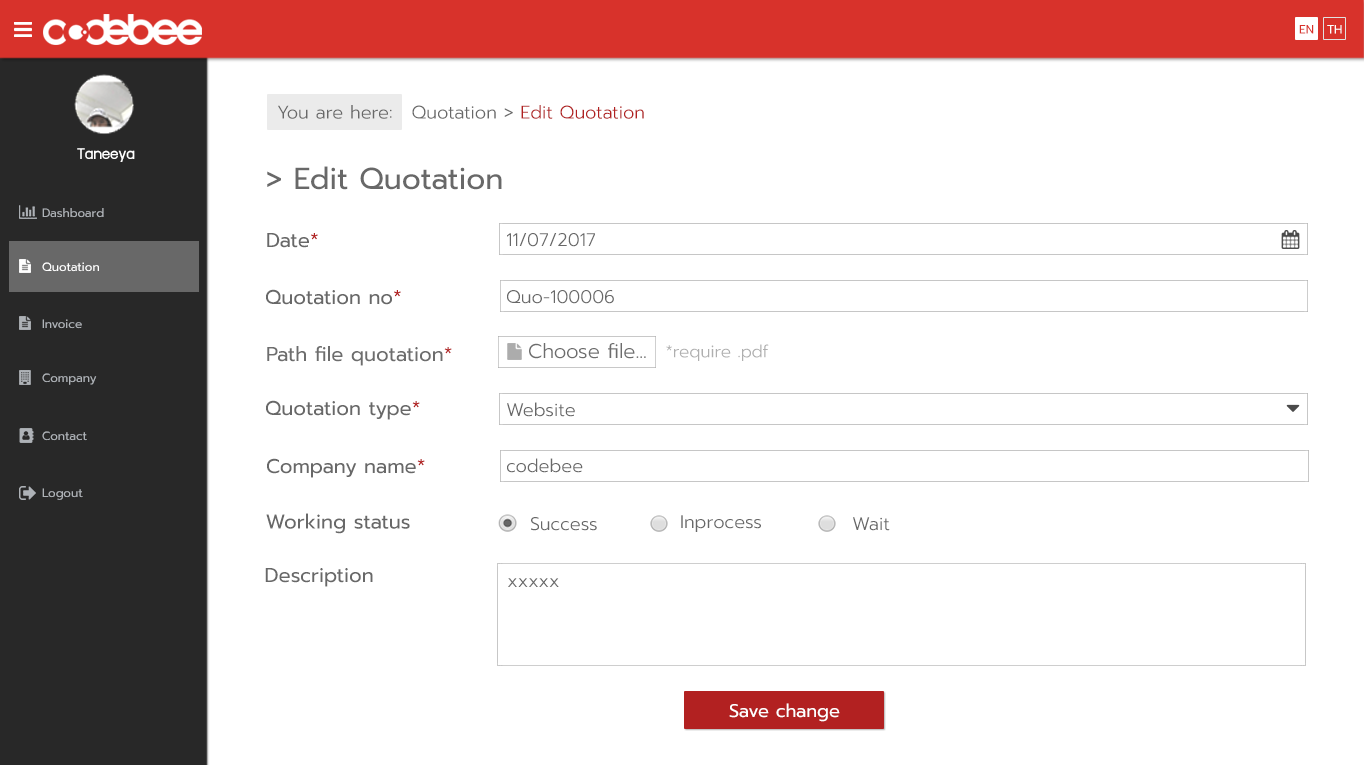
<style>
.page{position:relative;width:1364px;height:765px;background:#ffffff}
.page>*{position:absolute;margin:0}
.t1{font:12px "Prompt-Regular";color:#d8322b}
.t2{font:12px "Prompt-Regular";color:#ffffff}
.t3{font:18px "Prompt-Light";color:#686868}
.t4{font:18px "Prompt-Light";color:#b22121}
.t5{font:18px "supermarket";color:#ffffff}
.t6{font:30px "Prompt-Regular";color:#686868}
.t7{font:12px "Prompt-Regular";color:#aeb2b7}
.t8{font:20px "Prompt-Regular";color:#686868}
.t9{font:20px "Prompt-Regular";color:#b22121}
.t10{font:20px "Prompt-Light";color:#686868}
.t11{font:17px "Prompt-Light";color:#acacac}
.t12{font:18px "Prompt-Regular";color:#ffffff}
</style>
<div class="page">
<p class="t1" style="left:1299px;top:25px;width:15px;height:9px">EN</p>
<p class="t2" style="left:1327px;top:25px;width:15px;height:9px">TH</p>
<p class="t3" style="left:278px;top:105px;width:114px;height:14px">You are here:</p>
<p class="t4" style="left:412px;top:105px;width:232px;height:14px"><span class="t3">Quotation &gt; </span>Edit Quotation</p>
<p class="t5" style="left:77px;top:148px;width:58px;height:14px">Taneeya</p>
<p class="t6" style="left:267px;top:166px;width:235px;height:24px">&gt; Edit Quotation</p>
<p class="t7" style="left:42px;top:208px;width:62px;height:10px">Dashboard</p>
<p class="t8" style="left:267px;top:233px;width:51px;height:15px">Date<span class="t9">*</span></p>
<p class="t3" style="left:507px;top:233px;width:88px;height:14px">11/07/2017</p>
<p class="t2" style="left:42px;top:262px;width:57px;height:10px">Quotation</p>
<p class="t8" style="left:266px;top:289px;width:135px;height:16px">Quotation no<span class="t9">*</span></p>
<p class="t3" style="left:507px;top:290px;width:107px;height:14px">Quo-100006</p>
<p class="t7" style="left:42px;top:319px;width:40px;height:10px">Invoice</p>
<p class="t8" style="left:267px;top:346px;width:185px;height:20px">Path file quotation<span class="t9">*</span></p>
<p class="t10" style="left:529px;top:343px;width:117px;height:16px">Choose file...</p>
<p class="t11" style="left:666px;top:344px;width:103px;height:17px">*require .pdf</p>
<p class="t7" style="left:42px;top:373px;width:55px;height:12px">Company</p>
<p class="t8" style="left:266px;top:400px;width:154px;height:20px">Quotation type<span class="t9">*</span></p>
<p class="t3" style="left:507px;top:402px;width:68px;height:15px">Website</p>
<p class="t7" style="left:42px;top:431px;width:45px;height:10px">Contact</p>
<p class="t8" style="left:267px;top:458px;width:158px;height:20px">Company name<span class="t9">*</span></p>
<p class="t3" style="left:507px;top:458px;width:76px;height:15px">codebee</p>
<p class="t7" style="left:42px;top:488px;width:41px;height:12px">Logout</p>
<p class="t8" style="left:266px;top:513px;width:144px;height:21px">Working status</p>
<p class="t3" style="left:531px;top:517px;width:66px;height:14px">Success</p>
<p class="t3" style="left:681px;top:515px;width:80px;height:17px">Inprocess</p>
<p class="t3" style="left:853px;top:517px;width:37px;height:14px">Wait</p>
<p class="t8" style="left:265px;top:568px;width:108px;height:19px">Description</p>
<p class="t3" style="left:508px;top:578px;width:51px;height:9px">xxxxx</p>
<p class="t12" style="left:729px;top:703px;width:111px;height:19px">Save change</p>
</div>
